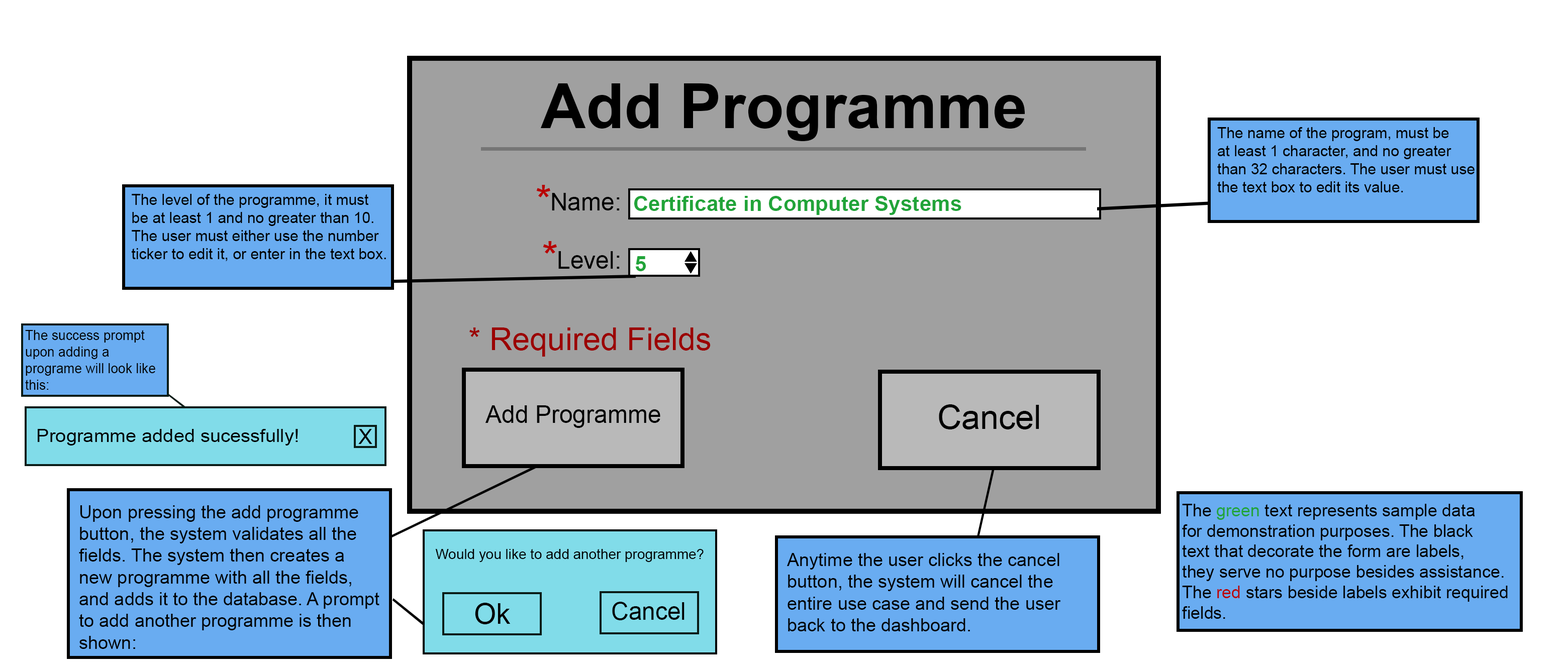
<style>
.page{position:relative;width:1568px;height:669px;background:#ffffff}
.page>*{position:absolute;margin:0}
.t1{font:62.6px "Arial-BoldMT";color:#000000}
.t2{font:15.1px "ArialMT";color:#000000}
.t3{font:41.6px "ArialMT";color:#b80000}
.t4{font:24.1px "ArialMT";color:#000000}
.t5{font:21.3px "Arial-BoldMT";color:#21a439}
.t6{font:31.7px "ArialMT";color:#9b0000}
.t7{font:13.8px "ArialMT";color:#000000;scale:0.97 1}
.t8{font:33.5px "ArialMT";color:#000000}
.t9{font:18.1px "ArialMT";color:#000000;scale:1.06 1}
.t10{font:21px "ArialMT";color:#000000}
.t11{font:18.1px "ArialMT";color:#000000}
.t12{font:17.1px "ArialMT";color:#000000}
.t13{font:17.1px "ArialMT";color:#21a439}
.t14{font:17.1px "ArialMT";color:#b80000}
.t15{font:14px "ArialMT";color:#000000}
.t16{font:28.6px "ArialMT";color:#000000}
.t17{font:24px "ArialMT";color:#000000}
</style>
<div class="page">
<p class="t1" style="left:540px;top:83px;width:485px;height:58px">Add Programme</p>
<p class="t2" style="left:1217px;top:127px;width:258px;height:65px">The name of the program, must be<br>at least 1 character, and no greater<br>than 32 characters. The user must use<br>the text box to edit its value.</p>
<p class="t3" style="left:536px;top:185px;width:14px;height:13px">*</p>
<p class="t2" style="left:132px;top:194px;width:254px;height:67px">The level of the programme, it must<br>be at least 1 and no greater than 10.<br>The user must either use the number<br>ticker to edit it, or enter in the text box.</p>
<p class="t4" style="left:552px;top:193px;width:68px;height:18px">Name:</p>
<p class="t5" style="left:634px;top:196px;width:327px;height:19px">Certificate in Computer Systems</p>
<p class="t3" style="left:543px;top:241px;width:14px;height:13px">*</p>
<p class="t4" style="left:558px;top:251px;width:62px;height:18px">Level:</p>
<p class="t5" style="left:635px;top:256px;width:11px;height:15px">5</p>
<p class="t6" style="left:469px;top:328px;width:242px;height:29px">* Required Fields</p>
<p class="t7" style="left:25px;top:330px;width:130px;height:60px">The success prompt<br>upon adding a<br>programe will look like <br>this:</p>
<p class="t4" style="left:485px;top:406px;width:175px;height:22px">Add Programme</p>
<p class="t8" style="left:939px;top:405px;width:100px;height:25px">Cancel</p>
<p class="t9" style="left:38px;top:429px;width:260px;height:17px">Programme added sucessfully!</p>
<p class="t10" style="left:358px;top:429px;width:14px;height:15px">X</p>
<p class="t11" style="left:79px;top:506px;width:300px;height:143px">Upon pressing the add programme<br>button, the system validates all the<br>fields. The system then creates a<br>new programme with all the fields,<br>and adds it to the database. A prompt<br>to add another programme is then<br>shown:</p>
<p class="t12" style="left:1182px;top:504px;width:326px;height:115px">The <span class="t13">green </span>text represents sample data<br>for demonstration purposes. The black<br>text that decorate the form are labels,<br>they serve no purpose besides assistance.<br>The <span class="t14">red </span>stars beside labels exhibit required<br>fields.</p>
<p class="t15" style="left:435px;top:549px;width:269px;height:13px">Would you like to add another programme?</p>
<p class="t11" style="left:787px;top:553px;width:274px;height:79px">Anytime the user clicks the cancel<br>button, the system will cancel the<br>entire use case and send the user <br>back to the dashboard.</p>
<p class="t16" style="left:475px;top:603px;width:36px;height:22px">Ok</p>
<p class="t17" style="left:612px;top:602px;width:72px;height:19px">Cancel</p>
</div>
